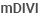
<style>
.page{position:relative;width:39px;height:16px;background:#ffffff}
.page>*{position:absolute;margin:0}
.t1{font:14px "Roboto-Medium";color:#4a4a4a}
</style>
<div class="page">
<p class="t1" style="left:1px;top:3px;width:37px;height:10px">mDIVI</p>
</div>
